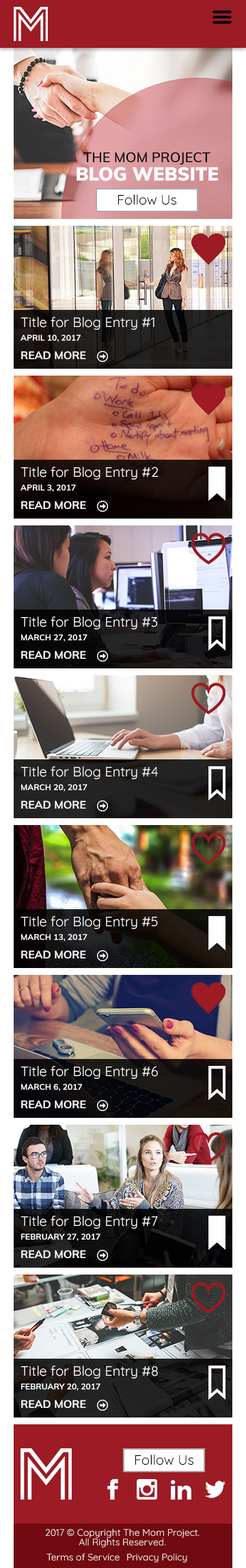
<style>
.page{position:relative;width:246px;height:1568px}
.page>*{position:absolute;margin:0}
.t1{font:13.7px "Muli-SemiBold";color:#000000}
.t2{font:18.5px "Muli-Black";color:#ffffff}
.t3{font:13.7px "Quicksand-Regular";color:#000000}
.t4{font:13.7px "Quicksand-Regular";color:#ffffff}
.t5{font:8.2px "Muli-Bold";color:#ffffff}
.t6{font:10.9px "Muli-Bold";color:#ffffff}
.t7{font:9.6px/9.6px "Quicksand-Regular";color:#ffffff}
.t8{font:9.6px "Quicksand-Regular";color:#ffffff}
</style>
<div class="page">
<p class="t1" style="left:83px;top:152px;width:128px;height:13px">THE MOM PROJECT</p>
<p class="t2" style="left:77px;top:167px;width:141px;height:14px">BLOG WEBSITE</p>
<p class="t3" style="left:118px;top:194px;width:59px;height:11px">Follow Us</p>
<p class="t4" style="left:21px;top:317px;width:134px;height:13px">Title for Blog Entry #1</p>
<p class="t5" style="left:21px;top:335px;width:60px;height:7px">APRIL 10, 2017</p>
<p class="t6" style="left:21px;top:351px;width:65px;height:9px">READ MORE</p>
<p class="t4" style="left:21px;top:467px;width:138px;height:13px">Title for Blog Entry #2</p>
<p class="t5" style="left:21px;top:484px;width:55px;height:8px">APRIL 3, 2017</p>
<p class="t6" style="left:21px;top:501px;width:65px;height:9px">READ MORE</p>
<p class="t4" style="left:21px;top:616px;width:136px;height:13px">Title for Blog Entry #3</p>
<p class="t5" style="left:21px;top:634px;width:67px;height:8px">MARCH 27, 2017</p>
<p class="t6" style="left:21px;top:651px;width:65px;height:8px">READ MORE</p>
<p class="t4" style="left:21px;top:766px;width:137px;height:13px">Title for Blog Entry #4</p>
<p class="t5" style="left:21px;top:784px;width:67px;height:8px">MARCH 20, 2017</p>
<p class="t6" style="left:21px;top:800px;width:65px;height:9px">READ MORE</p>
<p class="t4" style="left:21px;top:916px;width:137px;height:13px">Title for Blog Entry #5</p>
<p class="t5" style="left:21px;top:934px;width:67px;height:7px">MARCH 13, 2017</p>
<p class="t6" style="left:21px;top:950px;width:65px;height:9px">READ MORE</p>
<p class="t4" style="left:21px;top:1066px;width:137px;height:13px">Title for Blog Entry #6</p>
<p class="t5" style="left:21px;top:1084px;width:61px;height:7px">MARCH 6, 2017</p>
<p class="t6" style="left:21px;top:1100px;width:65px;height:9px">READ MORE</p>
<p class="t4" style="left:21px;top:1216px;width:137px;height:13px">Title for Blog Entry #7</p>
<p class="t5" style="left:21px;top:1233px;width:80px;height:8px">FEBRUARY 27, 2017</p>
<p class="t6" style="left:21px;top:1250px;width:65px;height:9px">READ MORE</p>
<p class="t4" style="left:21px;top:1366px;width:137px;height:12px">Title for Blog Entry #8</p>
<p class="t5" style="left:21px;top:1383px;width:80px;height:8px">FEBRUARY 20, 2017</p>
<p class="t6" style="left:21px;top:1400px;width:65px;height:9px">READ MORE</p>
<p class="t3" style="left:135px;top:1454px;width:59px;height:11px">Follow Us</p>
<p class="t7" style="left:45px;top:1528px;width:155px;height:19px;text-align:center">2017 © Copyright The Mom Project.<br>All Rights Reserved.</p>
<p class="t8" style="left:47px;top:1553px;width:73px;height:8px">Terms of Service</p>
<p class="t8" style="left:127px;top:1553px;width:60px;height:10px">Privacy Policy</p>
</div>
